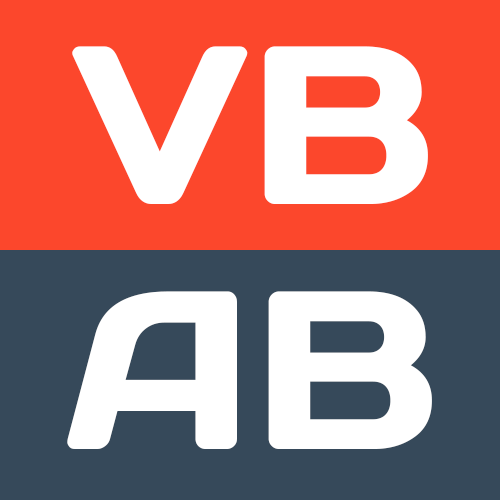
<style>
.page{position:relative;width:500px;height:500px;background:#fc472c}
.page>*{position:absolute;margin:0}
.t1{font:225px "DaysOne-Regular";color:#ffffff}
</style>
<div class="page">
<p class="t1" style="left:72px;top:46px;width:356px;height:158px">VB</p>
<p class="t1" style="left:67px;top:291px;width:365px;height:158px">AB</p>
</div>
